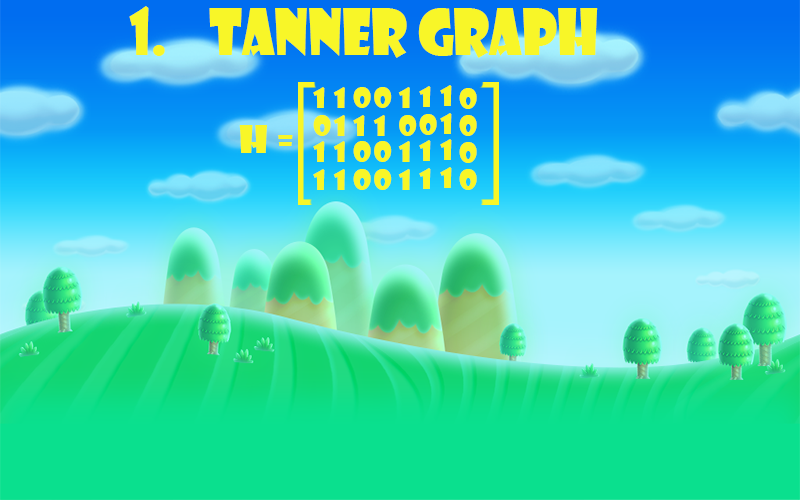
<style>
.page{position:relative;width:800px;height:500px}
.page>*{position:absolute;margin:0}
.t1{font:62.1px "ShowcardGothic-Reg";color:#f8f628;scale:0.85 1}
.t2{font:27.4px "ShowcardGothic-Reg";color:#f8f628;scale:1.14 1}
.t3{font:37.5px "ShowcardGothic-Reg";color:#f8f628}
</style>
<div class="page">
<p class="t1" style="left:129px;top:6px;width:469px;height:52px">1.    TANNER GRAPH</p>
<p class="t2" style="left:313px;top:87px;width:12px;height:21px">1</p>
<p class="t2" style="left:333px;top:87px;width:12px;height:21px">1</p>
<p class="t2" style="left:353px;top:87px;width:18px;height:21px">0</p>
<p class="t2" style="left:374px;top:87px;width:18px;height:21px">0</p>
<p class="t2" style="left:398px;top:87px;width:12px;height:21px">1</p>
<p class="t2" style="left:419px;top:86px;width:12px;height:21px">1</p>
<p class="t2" style="left:440px;top:85px;width:12px;height:21px">1</p>
<p class="t2" style="left:459px;top:88px;width:18px;height:21px">0</p>
<p class="t2" style="left:440px;top:113px;width:12px;height:21px">1</p>
<p class="t3" style="left:239px;top:125px;width:54px;height:28px">H =</p>
<p class="t2" style="left:313px;top:115px;width:18px;height:21px">0</p>
<p class="t2" style="left:333px;top:115px;width:12px;height:21px">1</p>
<p class="t2" style="left:353px;top:115px;width:12px;height:21px">1</p>
<p class="t2" style="left:373px;top:115px;width:12px;height:21px">1</p>
<p class="t2" style="left:399px;top:115px;width:18px;height:21px">0</p>
<p class="t2" style="left:419px;top:114px;width:18px;height:21px">0</p>
<p class="t2" style="left:459px;top:115px;width:18px;height:21px">0</p>
<p class="t2" style="left:313px;top:141px;width:12px;height:21px">1</p>
<p class="t2" style="left:333px;top:141px;width:12px;height:21px">1</p>
<p class="t2" style="left:353px;top:141px;width:18px;height:21px">0</p>
<p class="t2" style="left:374px;top:141px;width:18px;height:21px">0</p>
<p class="t2" style="left:398px;top:141px;width:12px;height:21px">1</p>
<p class="t2" style="left:419px;top:140px;width:12px;height:21px">1</p>
<p class="t2" style="left:440px;top:139px;width:12px;height:21px">1</p>
<p class="t2" style="left:459px;top:142px;width:18px;height:21px">0</p>
<p class="t2" style="left:313px;top:169px;width:12px;height:21px">1</p>
<p class="t2" style="left:333px;top:169px;width:12px;height:21px">1</p>
<p class="t2" style="left:353px;top:169px;width:18px;height:21px">0</p>
<p class="t2" style="left:374px;top:169px;width:18px;height:21px">0</p>
<p class="t2" style="left:398px;top:169px;width:12px;height:21px">1</p>
<p class="t2" style="left:419px;top:168px;width:12px;height:21px">1</p>
<p class="t2" style="left:440px;top:167px;width:12px;height:21px">1</p>
<p class="t2" style="left:459px;top:169px;width:18px;height:21px">0</p>
</div>
